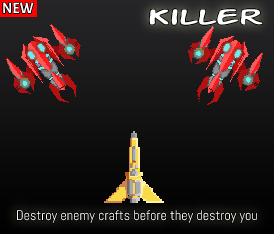
<style>
.page{position:relative;width:274px;height:234px}
.page>*{position:absolute;margin:0}
.t1{font:15px "Acme-Regular";color:#ffffff}
.t2{font:24px "ActionManExtended";color:#ffffff}
.t3{font:14px "Abel-Regular";color:#ffffff}
</style>
<div class="page">
<p class="t1" style="left:3px;top:2px;width:31px;height:12px">NEW</p>
<p class="t2" style="left:149px;top:9px;width:114px;height:16px">Killer</p>
<p class="t3" style="left:17px;top:210px;width:240px;height:13px">Destroy enemy crafts before they destroy you</p>
</div>
